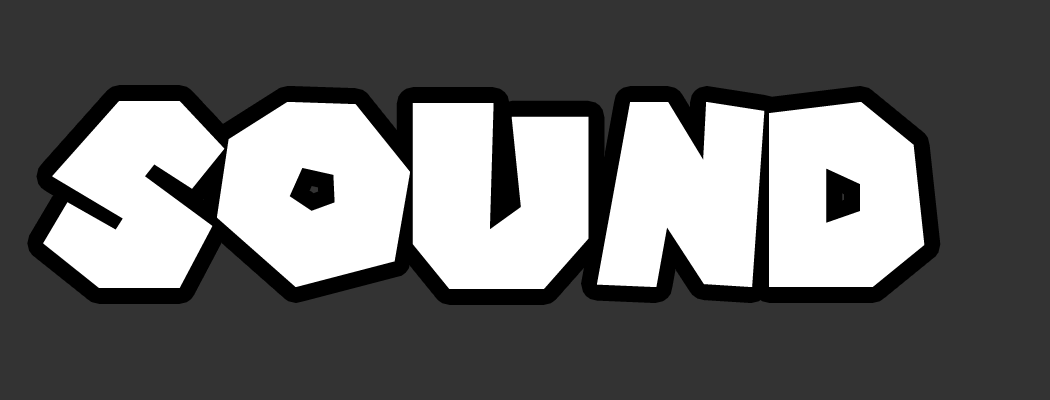
<style>
.page{position:relative;width:1050px;height:400px;background:#333333}
.page>*{position:absolute;margin:0}
.t1{font:250px "SuperMarioGalaxy";color:#ffffff}
</style>
<div class="page">
<p class="t1" style="left:43px;top:101px;width:882px;height:188px">SOUND</p>
</div>
